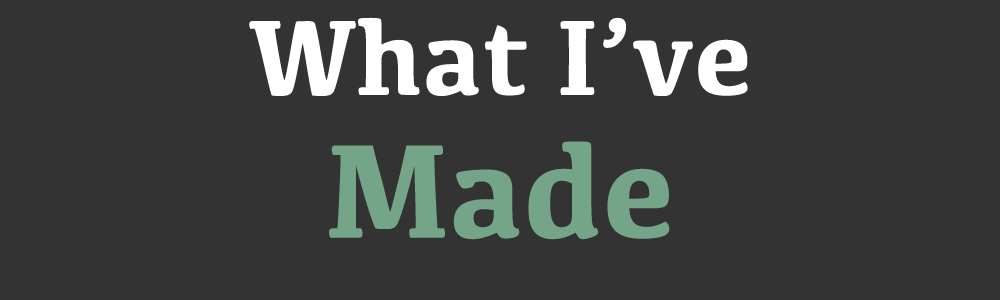
<style>
.page{position:relative;width:1000px;height:300px;background:#333333}
.page>*{position:absolute;margin:0}
.t1{font:110.4px "Kefa-Bold";color:#ffffff}
.t2{font:138.2px "Kefa-Bold";color:#74a588}
</style>
<div class="page">
<p class="t1" style="left:249px;top:17px;width:499px;height:79px">What I’ve</p>
<p class="t2" style="left:329px;top:141px;width:341px;height:99px">Made</p>
</div>
